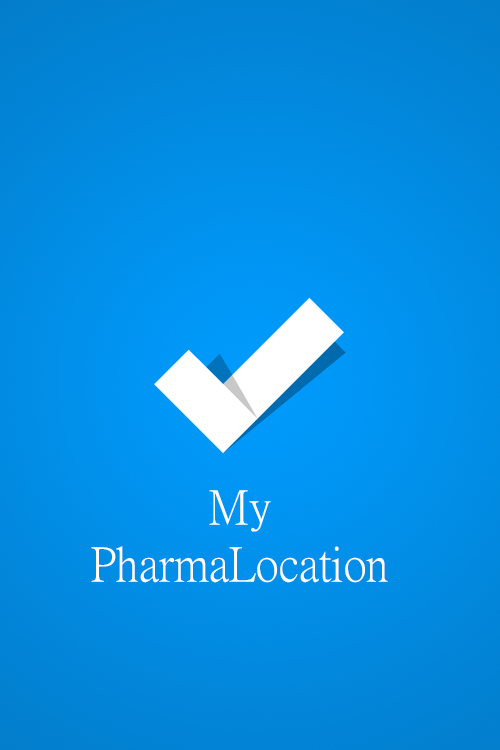
<style>
.page{position:relative;width:500px;height:750px}
.page>*{position:absolute;margin:0}
.t1{font:48px/1.9px "PMingLiU-ExtB";color:#ffffff}
</style>
<div class="page">
<p class="t1" style="left:91px;top:490px;width:297px;height:93px;text-align:center">My <br><br><br><br><br><br><br><br><br><br><br><br><br><br><br><br><br><br><br><br><br><br><br><br><br><br><br><br><br><br>PharmaLocation</p>
</div>
